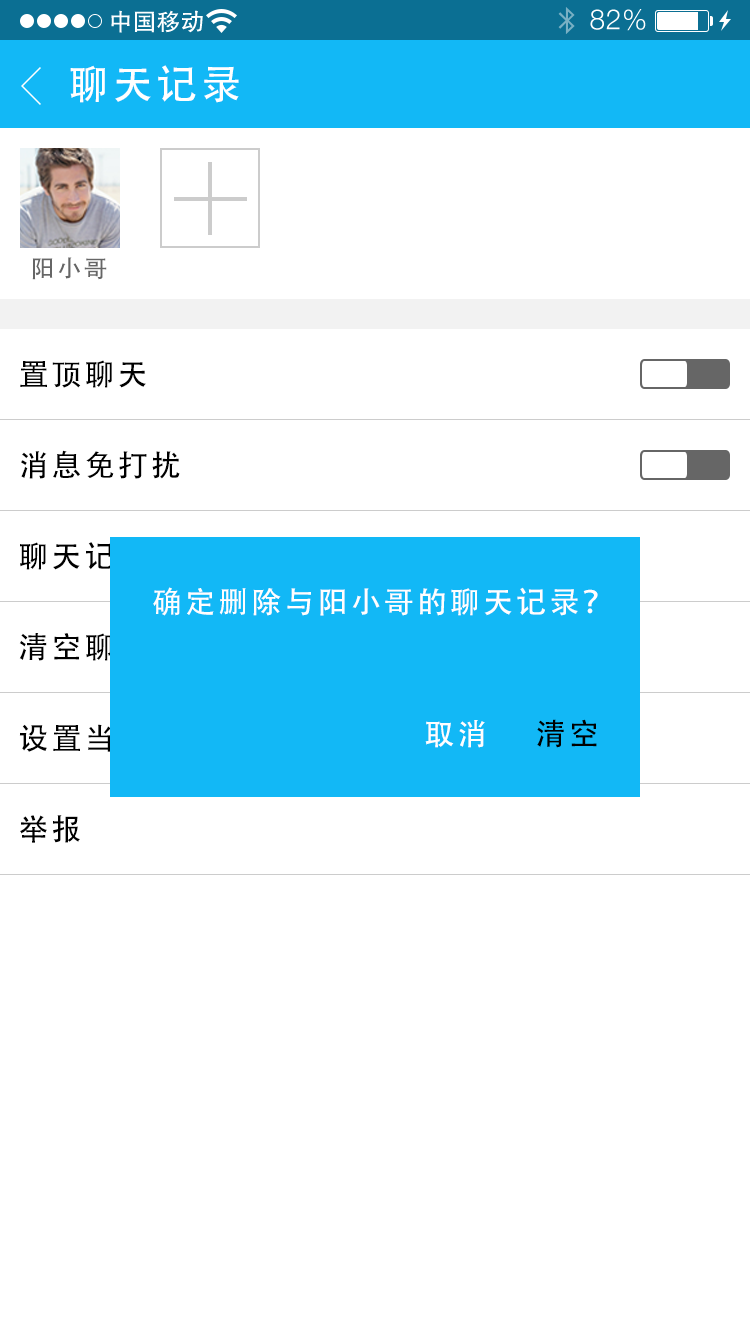
<style>
.page{position:relative;width:750px;height:1334px;background:#ffffff}
.page>*{position:absolute;margin:0}
.t1{font:40px "AdobeHeitiStd-Regular";letter-spacing:0.104em;color:#ffffff}
.t2{font:24px "AdobeHeitiStd-Regular";letter-spacing:0.104em;color:#666666}
.t3{font:30px "AdobeHeitiStd-Regular";letter-spacing:0.104em;color:#000000}
.t4{font:30px "AdobeHeitiStd-Regular";letter-spacing:0.104em;color:#fffefe}
.t5{font:30px "AdobeHeitiStd-Regular";letter-spacing:0.104em}
</style>
<div class="page">
<p class="t1" style="left:70px;top:65px;width:169px;height:38px">聊天记录</p>
<p class="t2" style="left:32px;top:257px;width:75px;height:23px">阳小哥</p>
<p class="t3" style="left:20px;top:360px;width:126px;height:28px">置顶聊天</p>
<p class="t3" style="left:21px;top:450px;width:159px;height:29px">消息免打扰</p>
<p class="t3" style="left:20px;top:542px;width:126px;height:28px">聊天记录</p>
<p class="t4" style="left:153px;top:587px;width:445px;height:29px">确定删除与阳小哥的聊天记录？</p>
<p class="t5" style="left:19px;top:633px;width:194px;height:28px">清空聊天记录</p>
<p class="t5" style="left:19px;top:724px;width:259px;height:28px">设置当前聊天背景</p>
<p class="t4" style="left:425px;top:720px;width:60px;height:28px">取消</p>
<p class="t3" style="left:537px;top:719px;width:60px;height:29px">清空</p>
<p class="t3" style="left:20px;top:815px;width:60px;height:28px">举报</p>
</div>
